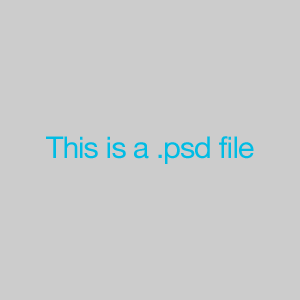
<style>
.page{position:relative;width:300px;height:300px;background:#cccccc}
.page>*{position:absolute;margin:0}
.t1{font:30px "HelveticaNeue";letter-spacing:-0.025em;color:#00bce4}
</style>
<div class="page">
<p class="t1" style="left:46px;top:136px;width:208px;height:28px">This is a .psd file</p>
</div>
